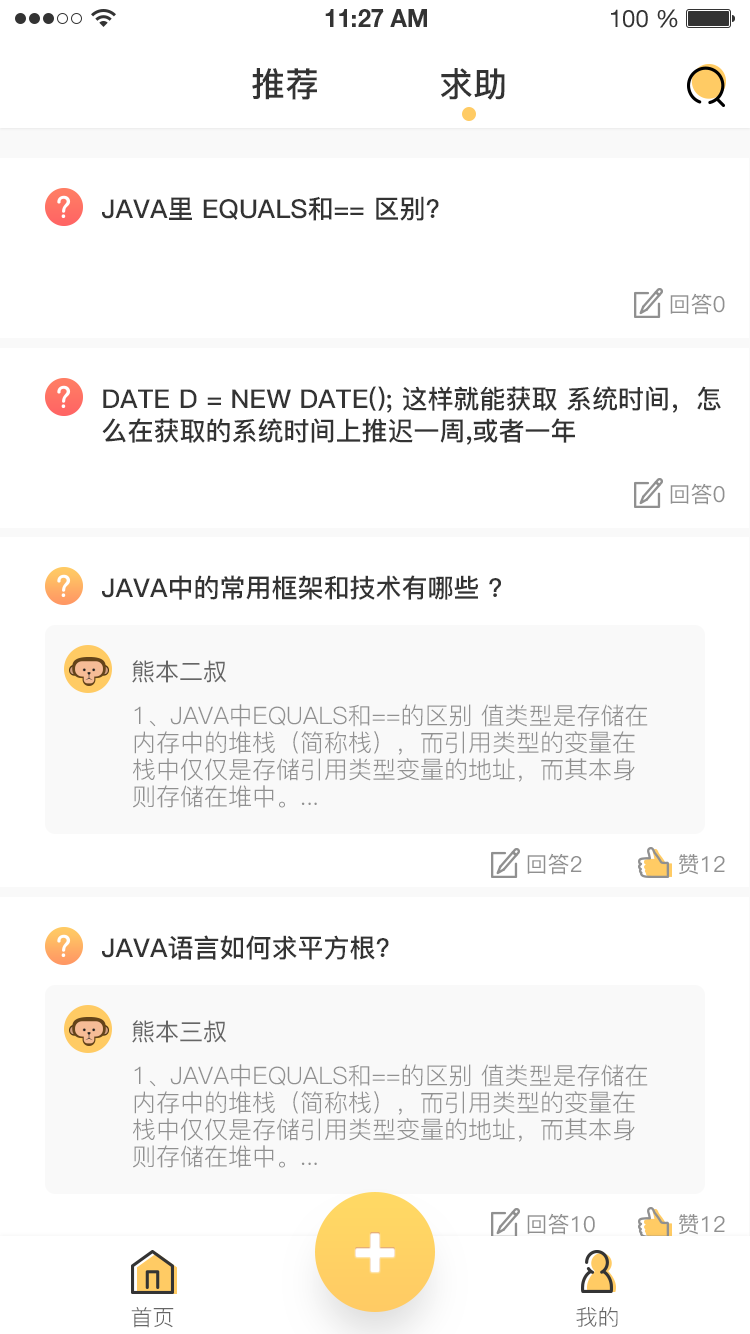
<style>
.page{position:relative;width:750px;height:1334px;background:#ffffff}
.page>*{position:absolute;margin:0}
.t1{font:34px "PingFang-SC-Bold";color:#333333;text-transform:uppercase}
.t2{font:26px "PingFang-SC-Bold";color:#333333;text-transform:uppercase}
.t3{font:22px "PingFang-SC-Medium";color:#909090;text-transform:uppercase}
.t4{font:26px/32px "PingFang-SC-Bold";color:#333333;text-transform:uppercase}
.t5{font:24px "PingFang-SC-Medium";color:#666666;text-transform:uppercase}
.t6{font:24px/27px "PingFang-SC-Regular";color:#909090;text-transform:uppercase}
.t7{font:22px "PingFang-SC-Regular";color:#666666;text-transform:uppercase}
</style>
<div class="page">
<p class="t1" style="left:252px;top:68px;width:65px;height:32px">推荐</p>
<p class="t1" style="left:441px;top:68px;width:64px;height:32px">求助</p>
<p class="t2" style="left:102px;top:196px;width:337px;height:25px">java里 equals和== 区别?</p>
<p class="t3" style="left:670px;top:293px;width:55px;height:22px">回答0</p>
<p class="t4" style="left:102px;top:386px;width:619px;height:59px">Date d = new Date(); 这样就能获取 系统时间，怎<br>么在获取的系统时间上推迟一周,或者一年</p>
<p class="t3" style="left:670px;top:483px;width:55px;height:22px">回答0</p>
<p class="t2" style="left:102px;top:575px;width:399px;height:25px">Java中的常用框架和技术有哪些 ?</p>
<p class="t5" style="left:132px;top:660px;width:94px;height:23px">熊本二叔</p>
<p class="t6" style="left:133px;top:704px;width:515px;height:104px">1、java中equals和==的区别 值类型是存储在内存中的堆栈（简称栈），而引用类型的变量在栈中仅仅是存储引用类型变量的地址，而其本身则存储在堆中。...</p>
<p class="t3" style="left:527px;top:853px;width:55px;height:22px">回答2</p>
<p class="t3" style="left:678px;top:854px;width:47px;height:21px">赞12</p>
<p class="t2" style="left:102px;top:935px;width:287px;height:25px">java语言如何求平方根?</p>
<p class="t5" style="left:132px;top:1020px;width:94px;height:23px">熊本三叔</p>
<p class="t6" style="left:133px;top:1064px;width:515px;height:104px">1、java中equals和==的区别 值类型是存储在内存中的堆栈（简称栈），而引用类型的变量在栈中仅仅是存储引用类型变量的地址，而其本身则存储在堆中。...</p>
<p class="t3" style="left:527px;top:1213px;width:68px;height:22px">回答10</p>
<p class="t3" style="left:678px;top:1214px;width:47px;height:21px">赞12</p>
<p class="t7" style="left:131px;top:1307px;width:43px;height:21px">首页</p>
<p class="t7" style="left:576px;top:1307px;width:42px;height:20px">我的</p>
</div>
